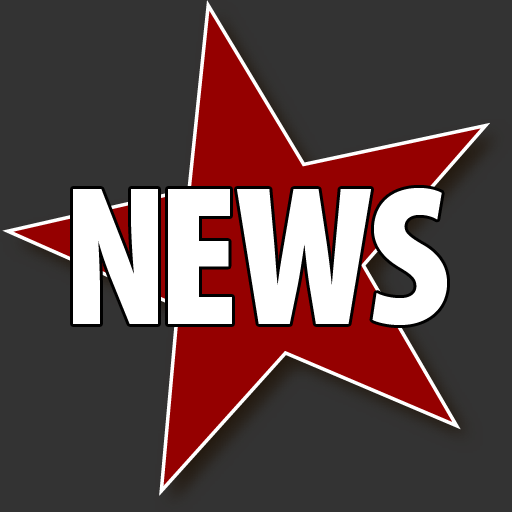
<style>
.page{position:relative;width:512px;height:512px;background:#333333}
.page>*{position:absolute;margin:0}
.t1{font:200px "MyriadPro-BlackCond";color:#ffffff}
</style>
<div class="page">
<p class="t1" style="left:73px;top:188px;width:374px;height:137px">NEWS</p>
</div>
